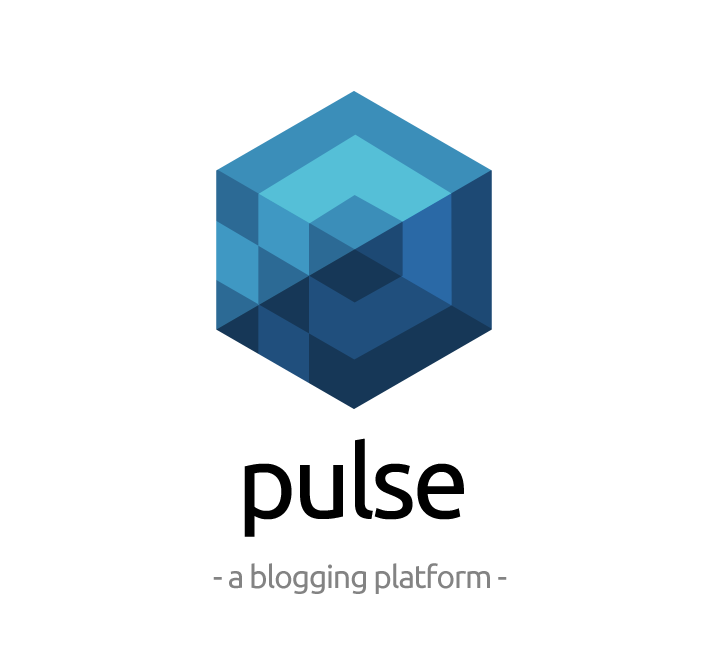
<style>
.page{position:relative;width:712px;height:656px;background:#ffffff}
.page>*{position:absolute;margin:0}
.t1{font:102px "Ubuntu";letter-spacing:-0.04em;color:#000000}
.t2{font:32px "Ubuntu";letter-spacing:-0.04em;color:#838383}
</style>
<div class="page">
<p class="t1" style="left:244px;top:438px;width:220px;height:99px">pulse</p>
<p class="t2" style="left:213px;top:563px;width:294px;height:31px">- a blogging platform -</p>
</div>
